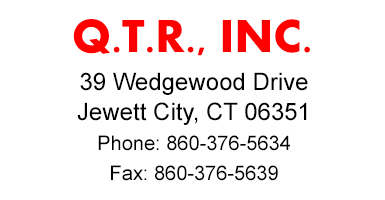
<style>
.page{position:relative;width:385px;height:200px;background:#ffffff}
.page>*{position:absolute;margin:0}
.t1{font:48px "Aharoni-Bold";color:#ff0000}
.t2{font:24px/30px "ArialMT";color:#000000}
.t3{font:20px/30px "ArialMT";color:#000000}
</style>
<div class="page">
<p class="t1" style="left:73px;top:19px;width:237px;height:37px">Q.T.R., INC.</p>
<p class="t2" style="left:77px;top:72px;width:231px;height:109px;text-align:center">39 Wedgewood Drive<br>Jewett City, CT 06351<br><span class="t3">Phone: 860-376-5634<br>Fax: 860-376-5639</span></p>
</div>
